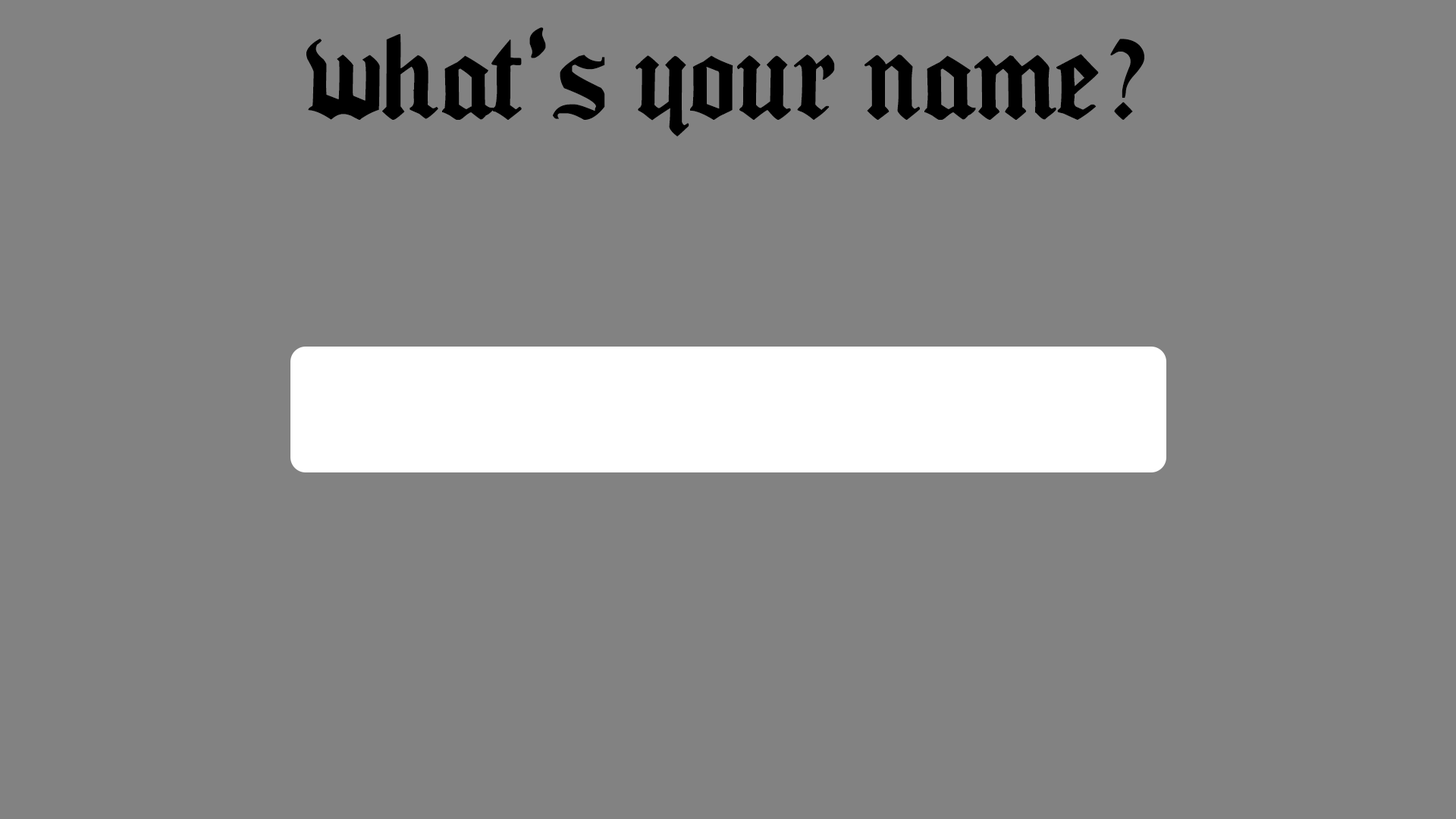
<style>
.page{position:relative;width:1456px;height:819px;background:#828282}
.page>*{position:absolute;margin:0}
.t1{font:110.6px "Seagramtfb";color:#000000}
</style>
<div class="page">
<p class="t1" style="left:306px;top:27px;width:838px;height:109px">what‘s your name?</p>
</div>
